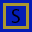
<style>
.page{position:relative;width:32px;height:32px;background:#041db5}
.page>*{position:absolute;margin:0}
.t1{font:20px "MyriadPro-Regular";color:#000000}
</style>
<div class="page">
<p class="t1" style="left:11px;top:9px;width:9px;height:14px">S</p>
</div>
